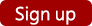
<style>
.page{position:relative;width:92px;height:26px;background:#a10000}
.page>*{position:absolute;margin:0}
.t1{font:17.2px "MicrosoftJhengHeiUIRegular";color:#ffffff}
</style>
<div class="page">
<p class="t1" style="left:15px;top:6px;width:61px;height:19px">Sign up</p>
</div>
